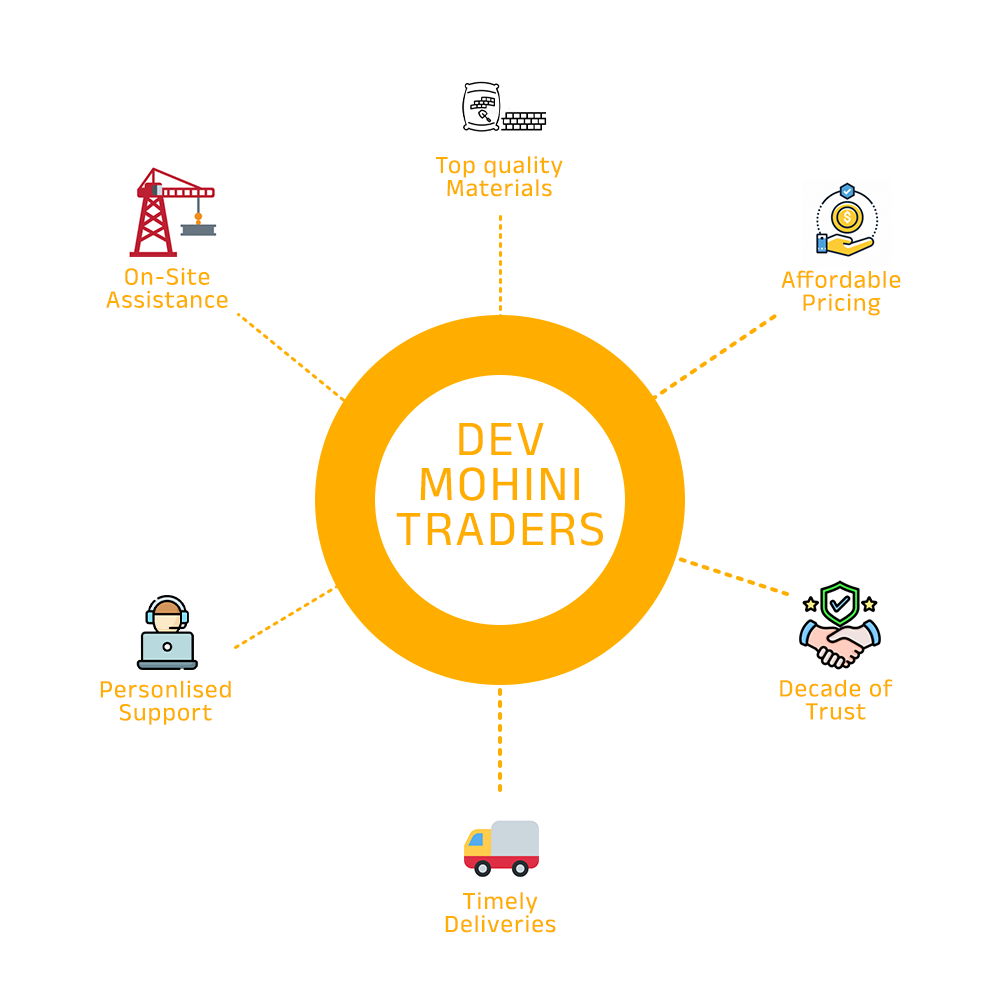
<style>
.page{position:relative;width:1000px;height:1000px;background:#ffffff}
.page>*{position:absolute;margin:0}
.t1{font:25px/23px "AnekDevanagari-Regular";letter-spacing:0.05em;color:#ffae00}
.t2{font:50px/45px "AnekDevanagari-Regular";letter-spacing:0.05em;color:#ffae00}
</style>
<div class="page">
<p class="t1" style="left:436px;top:156px;width:127px;height:41px;text-align:center">Top quality<br>Materials</p>
<p class="t1" style="left:106px;top:267px;width:122px;height:41px;text-align:center">On-Site<br>Assistance</p>
<p class="t1" style="left:781px;top:270px;width:120px;height:46px;text-align:center">Affordable<br>Pricing</p>
<p class="t2" style="left:396px;top:423px;width:207px;height:123px;text-align:center">DEV<br>MOHINI<br>TRADERS</p>
<p class="t1" style="left:100px;top:680px;width:131px;height:45px;text-align:center">Personlised<br>Support</p>
<p class="t1" style="left:780px;top:679px;width:113px;height:41px;text-align:center">Decade of<br>Trust</p>
<p class="t1" style="left:445px;top:892px;width:111px;height:41px;text-align:center">Timely<br>Deliveries</p>
</div>
